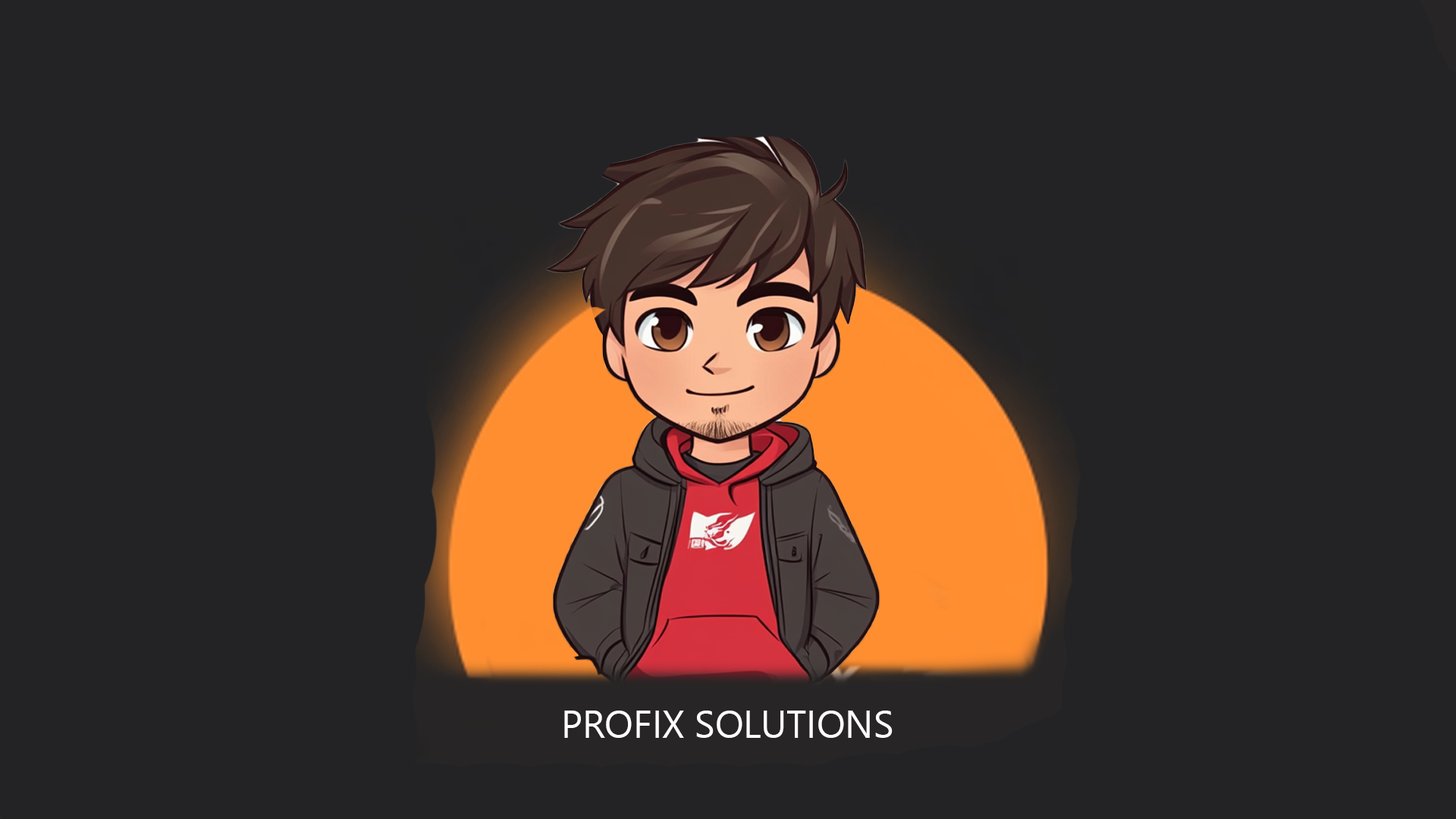
<style>
.page{position:relative;width:1456px;height:819px;background:#232325}
.page>*{position:absolute;margin:0}
.t1{font:37.9px "SegoeUI";color:#ffffff}
</style>
<div class="page">
<p class="t1" style="left:564px;top:711px;width:329px;height:27px">PROFIX SOLUTIONS</p>
</div>
